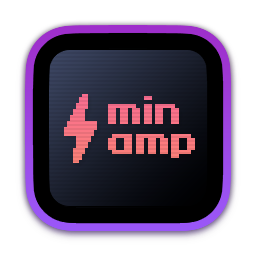
<style>
.page{position:relative;width:256px;height:256px;background:#ffffff}
.page>*{position:absolute;margin:0}
.t1{font:28px/48px "SlipstreamFatRegular7";color:#f1737f}
.t2{font:28px/29.3px "SlipstreamFatRegular7";color:#f1737f}
</style>
<div class="page">
<p class="t1" style="left:108px;top:96px;width:87px;height:62px">min<br><span class="t2">amp</span></p>
</div>
